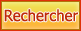
<style>
.page{position:relative;width:81px;height:31px}
.page>*{position:absolute;margin:0}
.t1{font:15.3px "Tahoma";letter-spacing:0.01em;color:#bf2a07;scale:0.96 1}
</style>
<div class="page">
<p class="t1" style="left:4px;top:9px;width:74px;height:13px">Rechercher</p>
</div>
